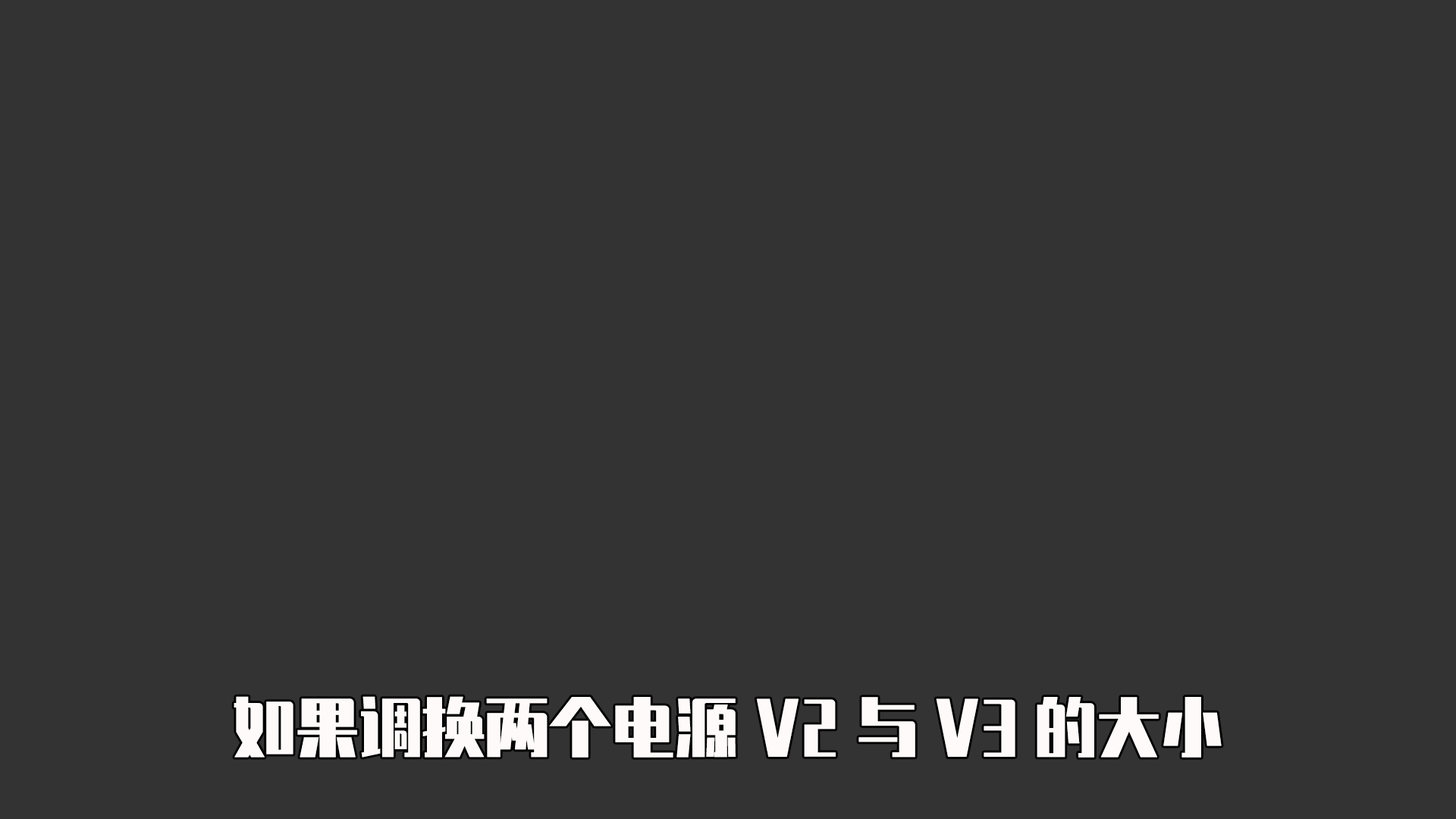
<style>
.page{position:relative;width:1456px;height:819px;background:#333333}
.page>*{position:absolute;margin:0}
.t1{font:63.2px "ZhenyanGB-Regular";color:#fefafa}
</style>
<div class="page">
<p class="t1" style="left:234px;top:696px;width:988px;height:62px">如果调换两个电源V2与V3的大小</p>
</div>
